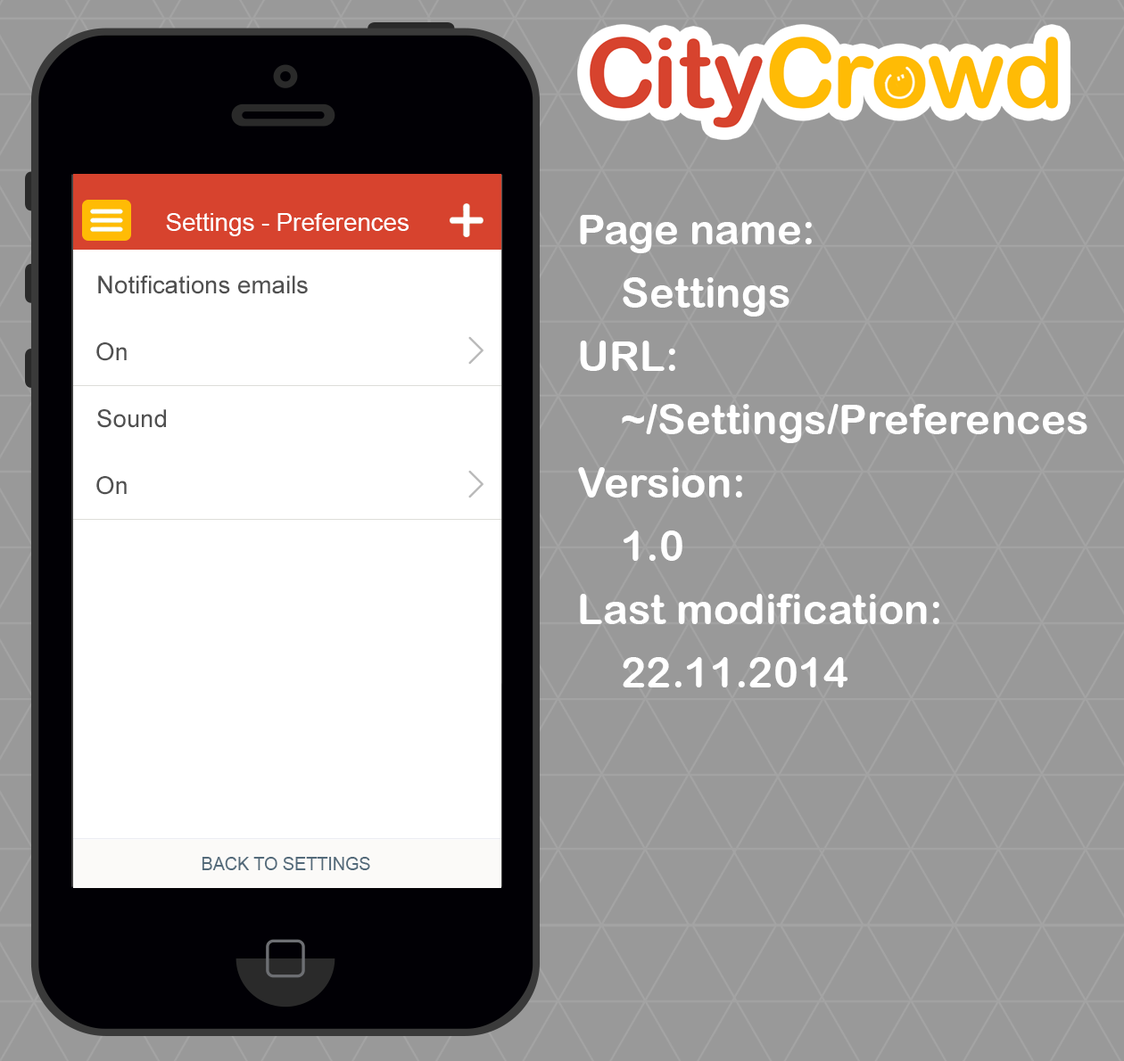
<style>
.page{position:relative;width:1124px;height:1061px;background:#999999}
.page>*{position:absolute;margin:0}
.t1{font:24.6px "ArialMT";color:#ffffff}
.t2{font:42.2px/63.3px "ArialRoundedMTBold";color:#ffffff}
.t3{font:24.6px "ArialMT";color:#505050}
.t4{font:17.6px "ArialMT";color:#536a7a}
</style>
<div class="page">
<p class="t1" style="left:166px;top:213px;width:242px;height:23px">Settings - Preferences</p>
<p class="t2" style="left:578px;top:215px;width:509px;height:473px">Page name:<br>Settings<br>URL:<br>~/Settings/Preferences<br>Version:<br>1.0<br>Last modification:<br>22.11.2014</p>
<p class="t3" style="left:98px;top:276px;width:210px;height:18px">Notifications emails</p>
<p class="t3" style="left:96px;top:342px;width:31px;height:19px">On</p>
<p class="t3" style="left:97px;top:409px;width:69px;height:19px">Sound</p>
<p class="t3" style="left:96px;top:476px;width:31px;height:19px">On</p>
<p class="t4" style="left:202px;top:857px;width:168px;height:13px">BACK TO SETTINGS</p>
</div>
